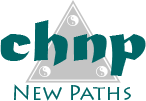
<style>
.page{position:relative;width:146px;height:101px;background:#ffffff}
.page>*{position:absolute;margin:0}
.t1{font:62.5px "MaturaMTScriptCapitals";color:#006666;scale:1.28 1}
.t2{font:20.8px "LithosPro-Regular";color:#006666}
</style>
<div class="page">
<p class="t1" style="left:0px;top:20px;width:146px;height:56px">chnp</p>
<p class="t2" style="left:14px;top:84px;width:117px;height:17px">New Paths</p>
</div>
